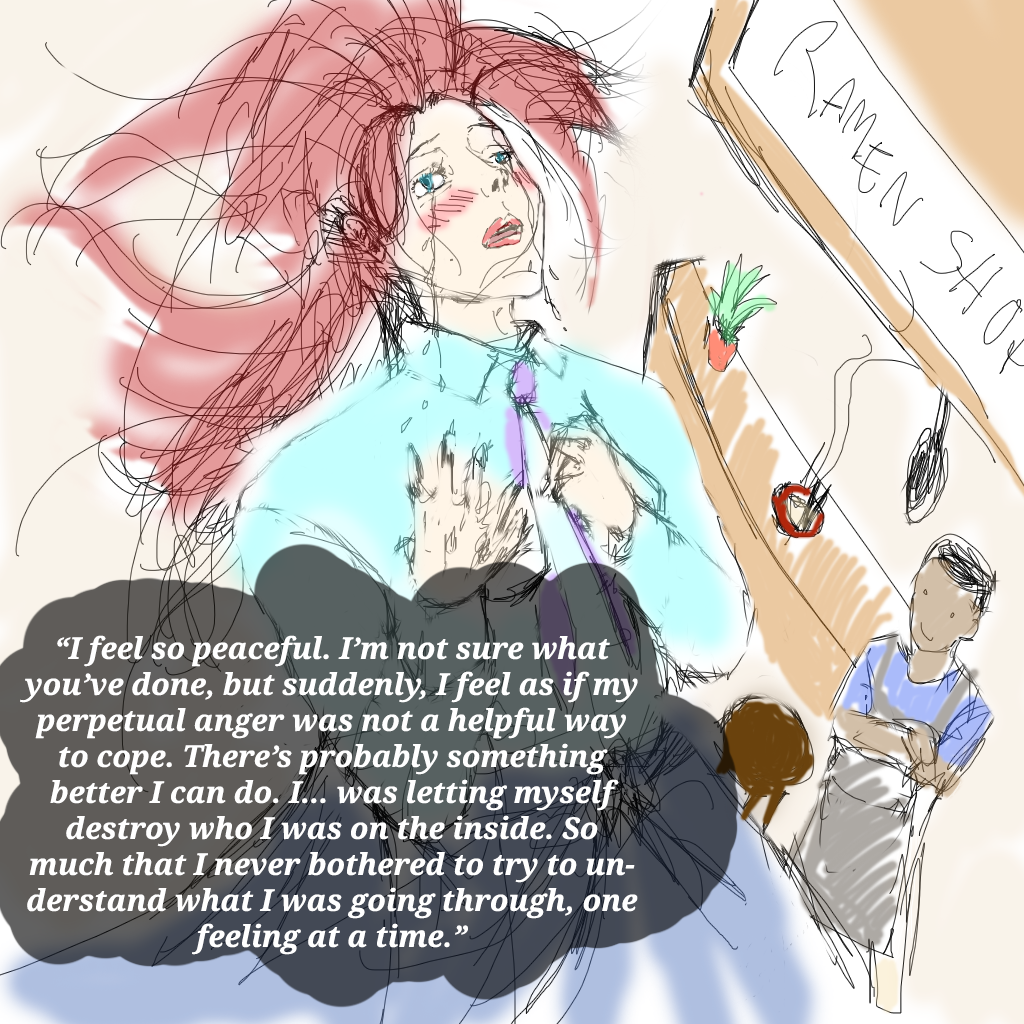
<style>
.page{position:relative;width:1024px;height:1024px}
.page>*{position:absolute;margin:0}
.t1{font:30px "NotoSerif-BoldItalic";color:#ffffff}
</style>
<div class="page">
<p class="t1" style="left:20px;top:635px;width:618px;height:320px;text-align:center">“I feel so peaceful. I’m not sure what you’ve done, but suddenly, I feel as if my perpetual anger was not a helpful way to cope. There’s probably something better I can do. I... was letting myself destroy who I was on the inside. So much that I never bothered to try to understand what I was going through, one feeling at a time.”</p>
</div>
